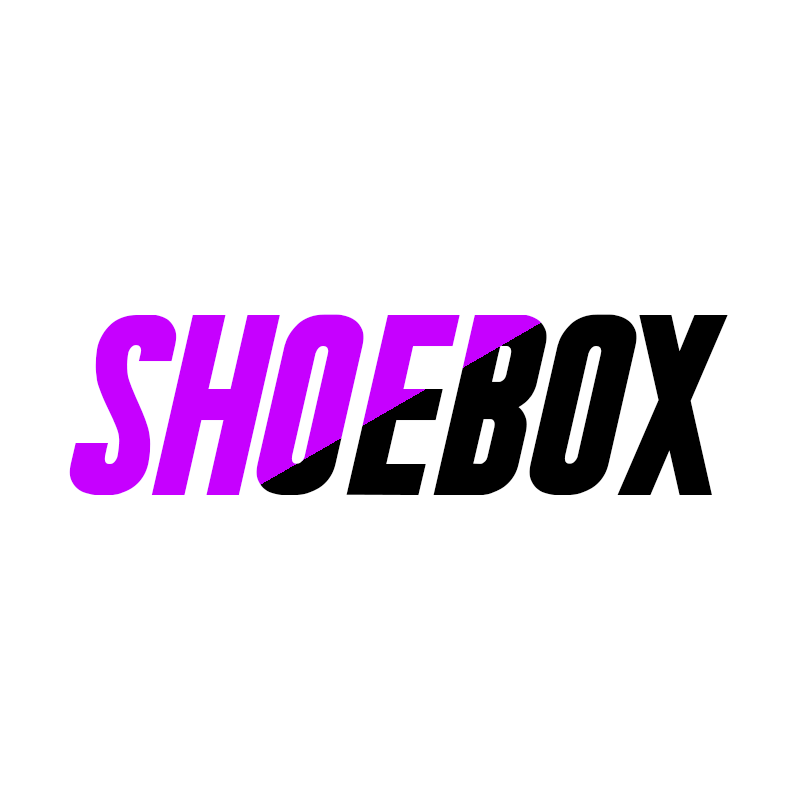
<style>
.page{position:relative;width:800px;height:800px;background:#ffffff}
.page>*{position:absolute;margin:0}
.t1{font:253.3px "UraeNium"}
</style>
<div class="page">
<p class="t1" style="left:69px;top:314px;width:659px;height:181px">Shoebox</p>
</div>
